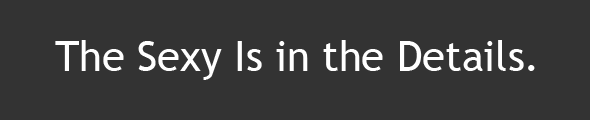
<style>
.page{position:relative;width:590px;height:120px;background:#333333}
.page>*{position:absolute;margin:0}
.t1{font:41.7px "TrebuchetMS";color:#ffffff}
</style>
<div class="page">
<p class="t1" style="left:55px;top:40px;width:480px;height:40px">The Sexy Is in the Details.</p>
</div>
